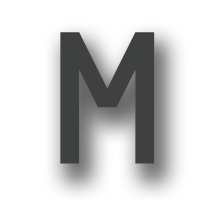
<style>
.page{position:relative;width:215px;height:200px;background:#ffffff}
.page>*{position:absolute;margin:0}
.t1{font:150px "Manteka";color:#3f4040}
</style>
<div class="page">
<p class="t1" style="left:60px;top:32px;width:95px;height:132px">M</p>
</div>
